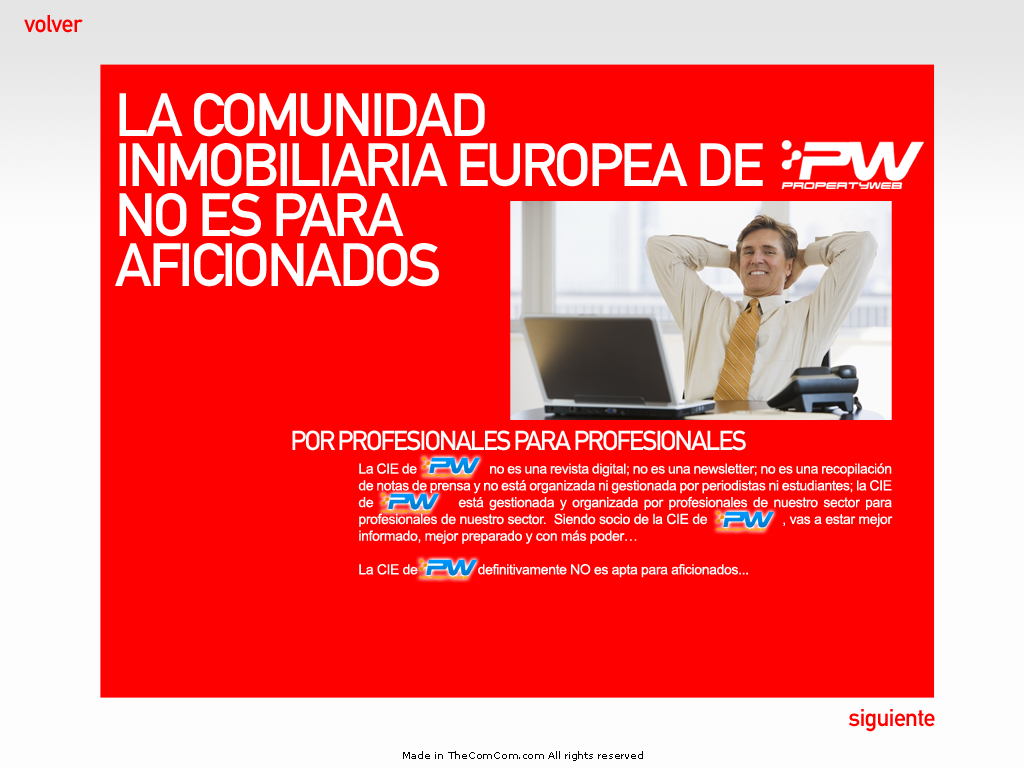
<style>
.page{position:relative;width:1024px;height:768px;background:#ff0000}
.page>*{position:absolute;margin:0}
.t1{font:24px "DINMittelschriftStd";letter-spacing:-0.025em;color:#ff0000}
.t2{font:60px/50px "DINMittelschriftStd";letter-spacing:-0.05em;color:#ffffff}
.t3{font:27px "DINMittelschriftStd";letter-spacing:-0.075em;color:#fefdfd}
.t4{font:14px "ArialMT";letter-spacing:-0.025em;color:#ffffff}
.t5{font:10px "MSReferenceSansSerif";letter-spacing:-0.025em;color:#010101}
</style>
<div class="page">
<p class="t1" style="left:24px;top:15px;width:59px;height:18px">volver</p>
<p class="t2" style="left:115px;top:93px;width:648px;height:194px">LA COMUNIDAD INMOBILIARIA EUROPEA DE NO ES PARA <br>AFICIONADOS</p>
<p class="t3" style="left:292px;top:430px;width:454px;height:21px">POR PROFESIONALES PARA PROFESIONALES</p>
<p class="t4" style="left:358px;top:463px;width:535px;height:115px;text-align:justify">La CIE de                       no es una revista digital; no es una newsletter; no es una recopilación de notas de prensa y no está organizada ni gestionada por periodistas ni estudiantes; la CIE de               está gestionada y organizada por profesionales de nuestro sector para profesionales de nuestro sector.  Siendo socio de la CIE de                    , vas a estar mejor informado, mejor preparado y con más poder… <br><br>La CIE de                 definitivamente NO es apta para aficionados...</p>
<p class="t1" style="left:848px;top:709px;width:87px;height:23px">siguiente</p>
<p class="t5" style="left:403px;top:751px;width:240px;height:10px">Made in TheComCom.com All rights reserved</p>
</div>
